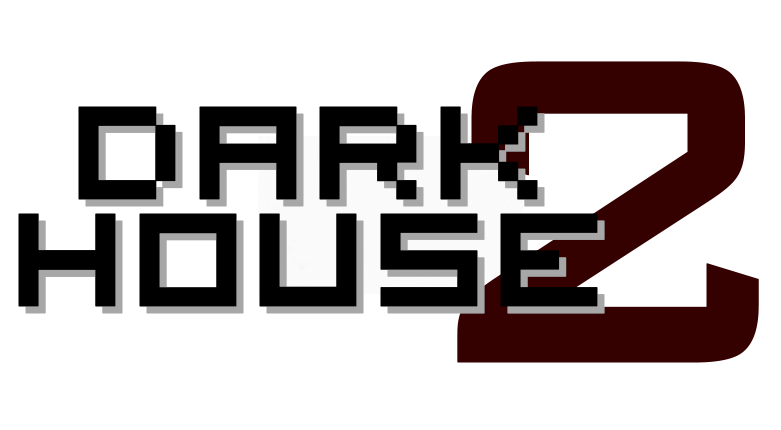
<style>
.page{position:relative;width:781px;height:430px;background:#ffffff}
.page>*{position:absolute;margin:0}
.t1{font:581.7px "BankGothicCMdBT-Medium";color:#350000;font-weight:bold;scale:0.94 1}
.t2{font:183.3px/107.1px "VisitorTT1BRK";color:#000000;font-weight:bold;scale:1.05 1}
.t3{font:183.3px/107.1px "VisitorTT1BRK";font-weight:bold;scale:1.05 1}
</style>
<div class="page">
<p class="t1" style="left:457px;top:61px;width:302px;height:302px">2</p>
<p class="t2" style="left:18px;top:106px;width:580px;height:201px;text-align:center">DARK<br>HOUSE</p>
<p class="t3" style="left:25px;top:113px;width:580px;height:201px;text-align:center">DARK<br>HOUSE</p>
</div>
